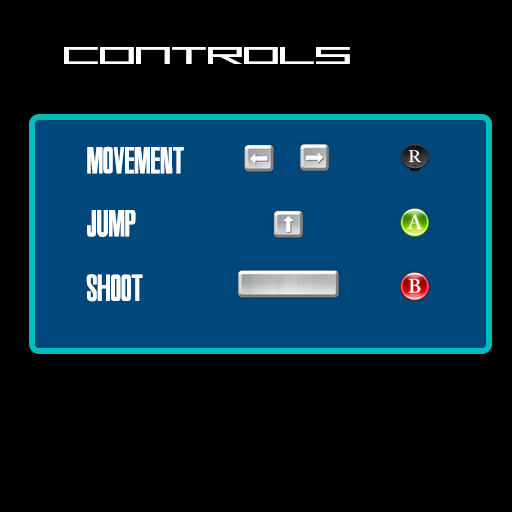
<style>
.page{position:relative;width:512px;height:512px;background:#000000}
.page>*{position:absolute;margin:0}
.t1{font:24px "MGS2Menu";color:#ffffff}
.t2{font:30px "Metal-Gear-Solid-2";color:#ffffff}
</style>
<div class="page">
<p class="t1" style="left:64px;top:47px;width:286px;height:17px">CONTROLS</p>
<p class="t2" style="left:87px;top:146px;width:97px;height:28px">Movement</p>
<p class="t2" style="left:87px;top:210px;width:49px;height:27px">Jump</p>
<p class="t2" style="left:86px;top:274px;width:57px;height:28px">Shoot</p>
</div>
